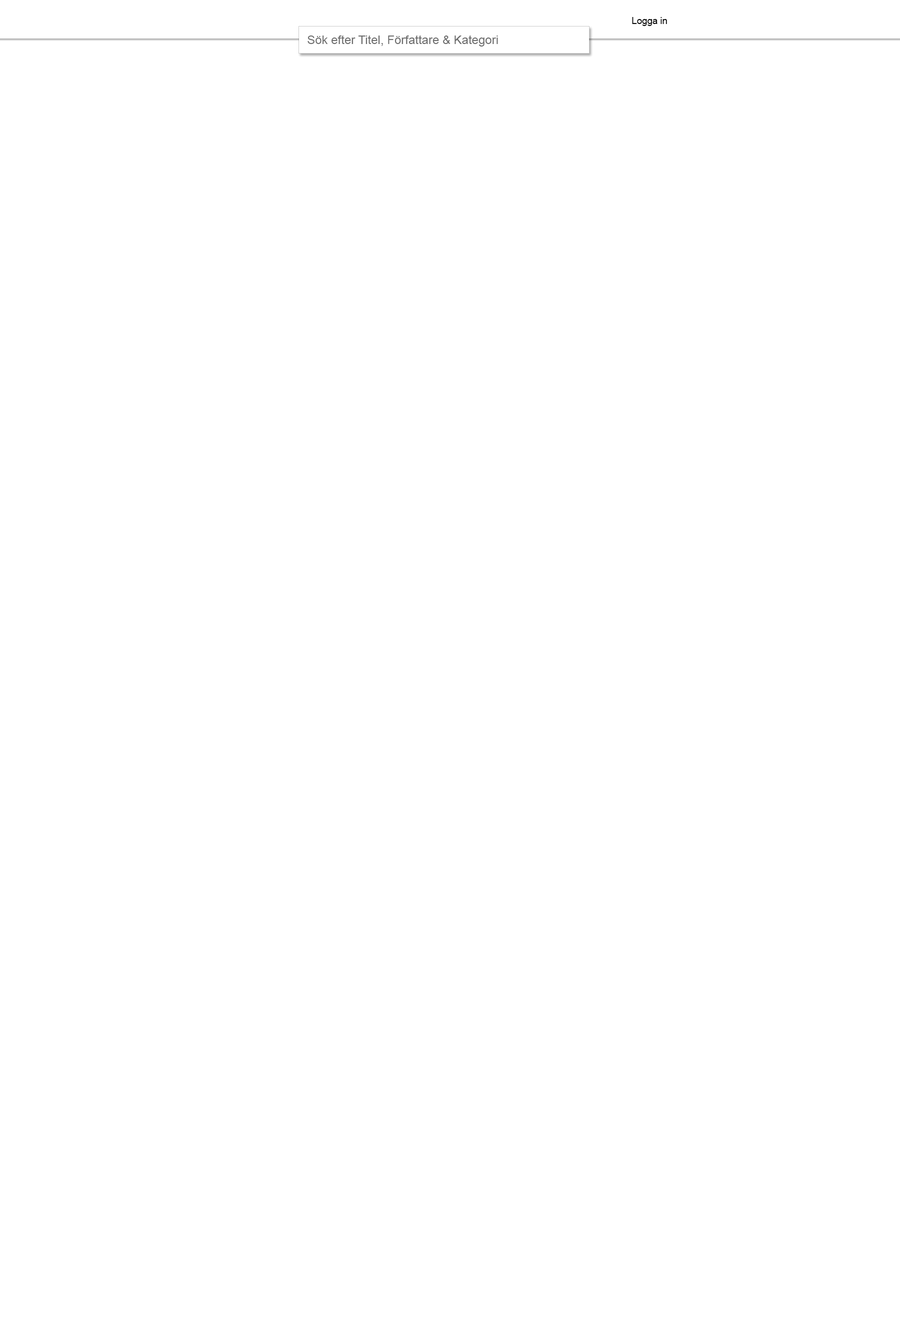
<style>
.page{position:relative;width:900px;height:1324px;background:#ffffff}
.page>*{position:absolute;margin:0}
.t1{font:9.3px "ArialMT";color:#000000}
.t2{font:12px "ArialMT";color:#6d6d6d}
</style>
<div class="page">
<p class="t1" style="left:632px;top:17px;width:35px;height:9px">Logga in</p>
<p class="t2" style="left:308px;top:35px;width:190px;height:12px">Sök efter Titel, Författare &amp; Kategori</p>
</div>
